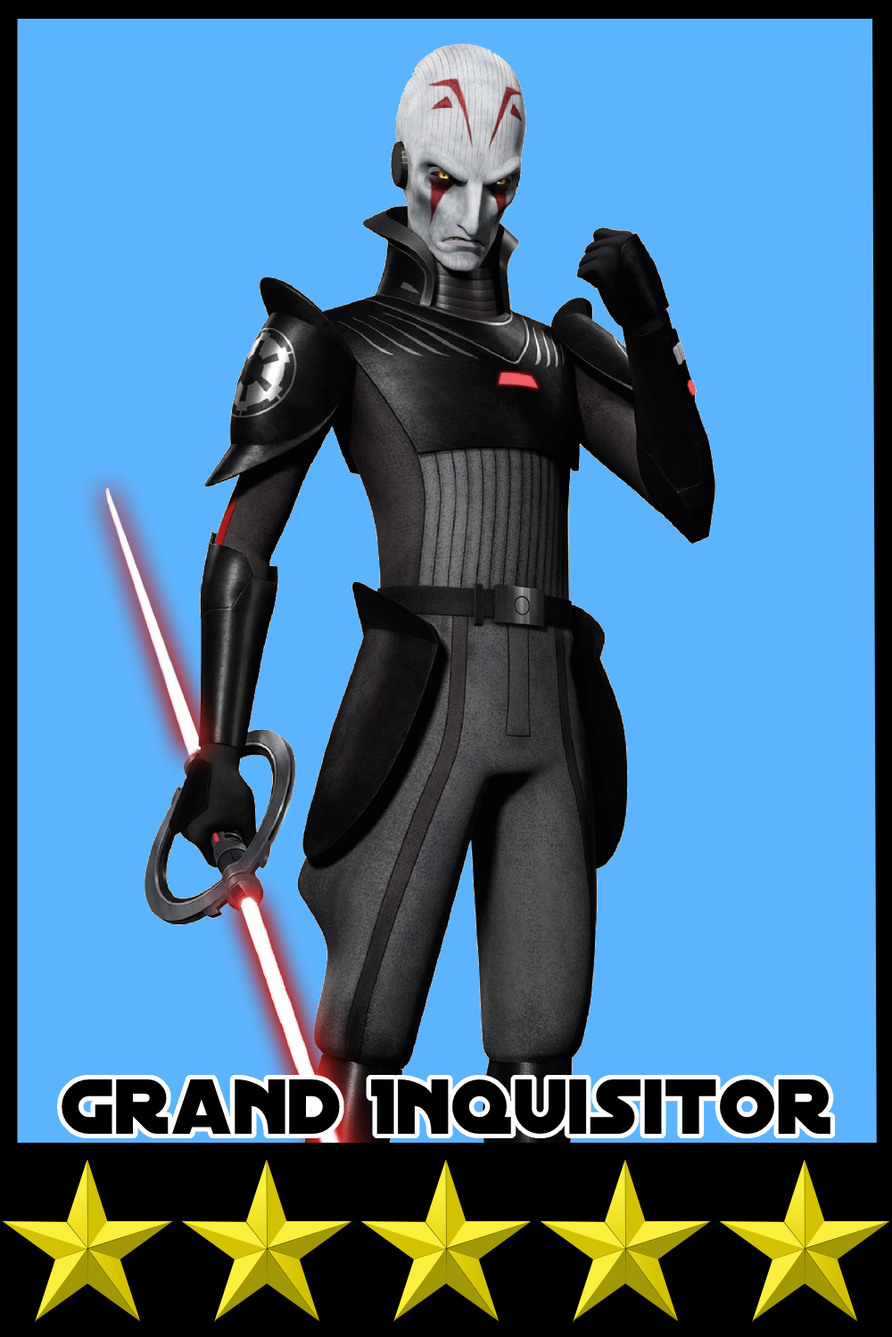
<style>
.page{position:relative;width:892px;height:1337px;background:#5cb4ff}
.page>*{position:absolute;margin:0}
.t1{font:83.6px "DistantGalaxy";color:#000000}
</style>
<div class="page">
<p class="t1" style="left:62px;top:1080px;width:768px;height:54px">Grand Inquisitor</p>
</div>
